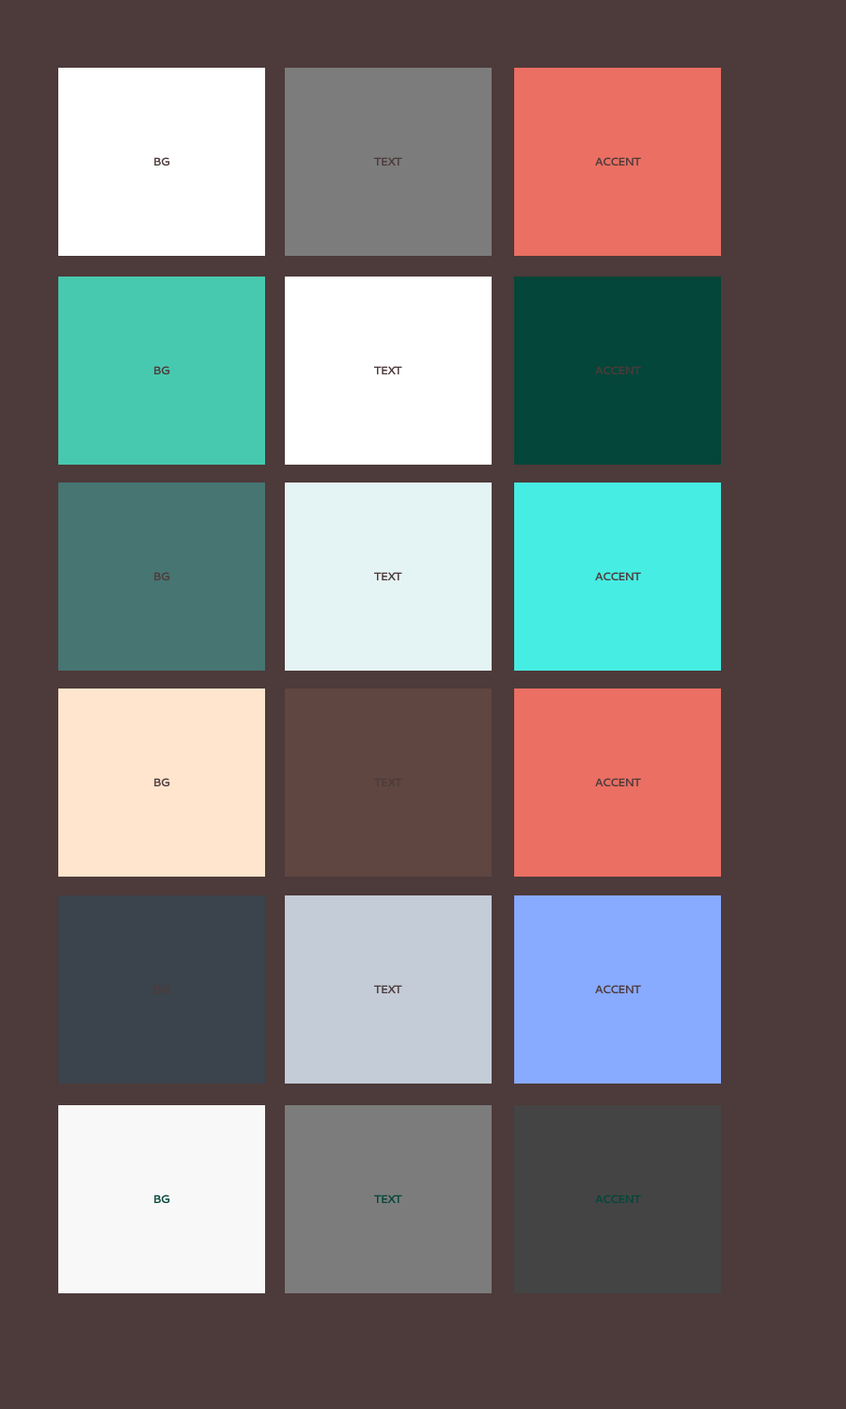
<style>
.page{position:relative;width:846px;height:1409px;background:#4d3a3a}
.page>*{position:absolute;margin:0}
.t1{font:11.3px "Cantarell-Bold";letter-spacing:-0.1em;color:#4d3a3a}
.t2{font:11.3px "Cantarell-Bold";letter-spacing:-0.1em;color:#044639}
</style>
<div class="page">
<p class="t1" style="left:154px;top:157px;width:16px;height:9px">BG</p>
<p class="t1" style="left:374px;top:157px;width:29px;height:9px">TEXT</p>
<p class="t1" style="left:595px;top:157px;width:46px;height:9px">ACCENT</p>
<p class="t1" style="left:154px;top:366px;width:16px;height:8px">BG</p>
<p class="t1" style="left:374px;top:366px;width:29px;height:8px">TEXT</p>
<p class="t1" style="left:595px;top:366px;width:46px;height:8px">ACCENT</p>
<p class="t1" style="left:154px;top:572px;width:16px;height:8px">BG</p>
<p class="t1" style="left:374px;top:572px;width:29px;height:8px">TEXT</p>
<p class="t1" style="left:595px;top:572px;width:46px;height:8px">ACCENT</p>
<p class="t1" style="left:154px;top:778px;width:16px;height:8px">BG</p>
<p class="t1" style="left:374px;top:778px;width:29px;height:8px">TEXT</p>
<p class="t1" style="left:595px;top:778px;width:46px;height:8px">ACCENT</p>
<p class="t1" style="left:154px;top:985px;width:16px;height:8px">BG</p>
<p class="t1" style="left:374px;top:985px;width:29px;height:8px">TEXT</p>
<p class="t1" style="left:595px;top:985px;width:46px;height:8px">ACCENT</p>
<p class="t2" style="left:154px;top:1194px;width:16px;height:9px">BG</p>
<p class="t2" style="left:374px;top:1194px;width:29px;height:9px">TEXT</p>
<p class="t2" style="left:595px;top:1194px;width:46px;height:9px">ACCENT</p>
</div>
